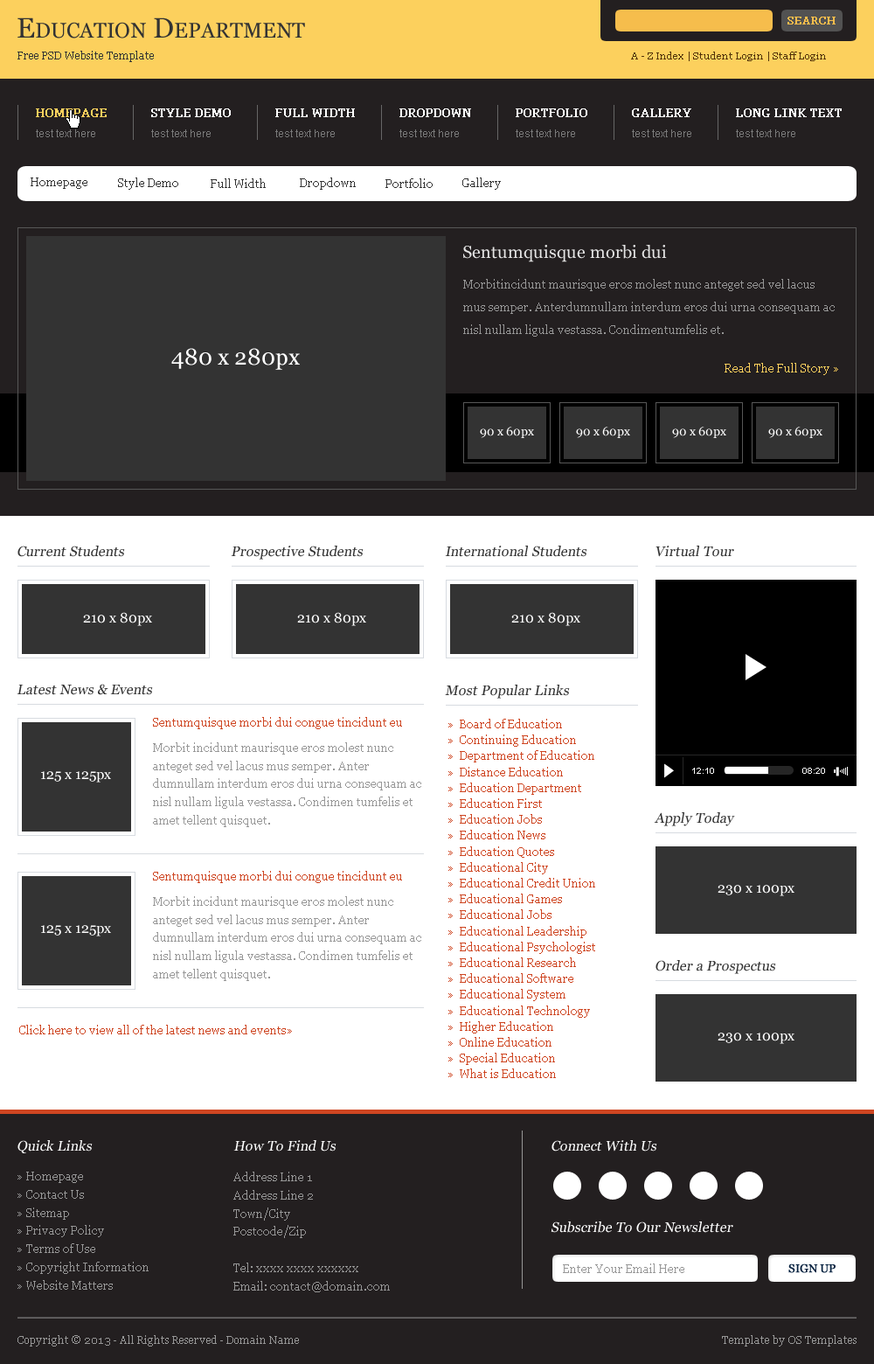
<style>
.page{position:relative;width:874px;height:1364px;background:#ffffff}
.page>*{position:absolute;margin:0}
.t1{font:21px "Georgia";color:#333333}
.t2{font:28px "Georgia";color:#333333}
.t3{font:10.5px "Georgia";color:#f6bd4c;font-weight:bold}
.t4{font:10.5px "Georgia";color:#333333}
.t5{font:9.6px "Georgia";color:#533209}
.t6{font:11.4px "Georgia";color:#fcd05d;font-weight:bold}
.t7{font:11.4px "Georgia";color:#ffffff;font-weight:bold}
.t8{font:10.5px "ArialMT";color:#797979}
.t9{font:11.4px "Georgia";color:#333333}
.t10{font:17.5px "Georgia";color:#e5e5e5}
.t11{font:11.4px/22.7px "Georgia";color:#979797}
.t12{font:22.7px "Georgia";color:#ffffff}
.t13{font:11.4px "Georgia";color:#fcd05d}
.t14{font:12.2px "Georgia";color:#ffffff}
.t15{font:14px "Georgia";color:#333333;font-style:italic}
.t16{font:14px "Georgia";color:#ffffff}
.t17{font:11.4px "Georgia";color:#ce4521}
.t18{font:11.4px/15.9px "Georgia";color:#ce4521}
.t19{font:11.4px/18.2px "Georgia";color:#979797}
.t20{font:8.7px "ArialMT";color:#ffffff}
.t21{font:14px "Georgia";color:#ffffff;font-style:italic}
.t22{font:11.4px "Georgia";color:#989898}
.t23{font:11.4px "Georgia";color:#06213f;text-transform:uppercase;font-weight:bold}
.t24{font:10.5px "Georgia";color:#979797}
</style>
<div class="page">
<p class="t1" style="left:17px;top:17px;width:288px;height:21px"><span class="t2">E</span>DUCATION<span class="t2"> D</span>EPARTMENT</p>
<p class="t3" style="left:788px;top:17px;width:48px;height:7px">SEARCH</p>
<p class="t4" style="left:17px;top:51px;width:137px;height:11px">Free PSD Website Template</p>
<p class="t5" style="left:631px;top:52px;width:195px;height:9px">A - Z Index | Student Login | Staff Login</p>
<p class="t6" style="left:36px;top:108px;width:71px;height:9px">HOMEPAGE</p>
<p class="t7" style="left:151px;top:108px;width:80px;height:9px">STYLE DEMO</p>
<p class="t7" style="left:275px;top:108px;width:80px;height:9px">FULL WIDTH</p>
<p class="t7" style="left:400px;top:108px;width:71px;height:9px">DROPDOWN</p>
<p class="t7" style="left:516px;top:108px;width:72px;height:9px">PORTFOLIO</p>
<p class="t7" style="left:632px;top:108px;width:60px;height:9px">GALLERY</p>
<p class="t7" style="left:736px;top:108px;width:106px;height:9px">LONG LINK TEXT</p>
<p class="t8" style="left:36px;top:129px;width:59px;height:8px">test text here</p>
<p class="t8" style="left:151px;top:129px;width:60px;height:8px">test text here</p>
<p class="t8" style="left:275px;top:129px;width:60px;height:8px">test text here</p>
<p class="t8" style="left:400px;top:129px;width:59px;height:8px">test text here</p>
<p class="t8" style="left:516px;top:129px;width:59px;height:8px">test text here</p>
<p class="t8" style="left:632px;top:129px;width:60px;height:8px">test text here</p>
<p class="t8" style="left:736px;top:129px;width:60px;height:8px">test text here</p>
<p class="t9" style="left:31px;top:177px;width:56px;height:12px">Homepage</p>
<p class="t9" style="left:118px;top:177px;width:60px;height:13px">Style Demo</p>
<p class="t9" style="left:211px;top:178px;width:55px;height:10px">Full Width</p>
<p class="t9" style="left:300px;top:177px;width:56px;height:13px">Dropdown</p>
<p class="t9" style="left:386px;top:178px;width:47px;height:10px">Portfolio</p>
<p class="t9" style="left:462px;top:177px;width:39px;height:13px">Gallery</p>
<p class="t10" style="left:463px;top:245px;width:204px;height:17px">Sentumquisque morbi dui</p>
<p class="t11" style="left:463px;top:279px;width:372px;height:58px">Morbitincidunt maurisque eros molest nunc anteget sed vel lacus mus semper. Anterdumnullam interdum eros dui urna consequam ac nisl nullam ligula vestassa. Condimentumfelis et.</p>
<p class="t12" style="left:171px;top:348px;width:129px;height:22px">480 x 280px</p>
<p class="t13" style="left:725px;top:363px;width:113px;height:12px">Read The Full Story »</p>
<p class="t14" style="left:480px;top:427px;width:54px;height:11px">90 x 60px</p>
<p class="t14" style="left:576px;top:427px;width:54px;height:11px">90 x 60px</p>
<p class="t14" style="left:672px;top:427px;width:55px;height:11px">90 x 60px</p>
<p class="t14" style="left:768px;top:427px;width:55px;height:11px">90 x 60px</p>
<p class="t15" style="left:17px;top:546px;width:108px;height:11px">Current Students</p>
<p class="t15" style="left:231px;top:546px;width:133px;height:14px">Prospective Students</p>
<p class="t15" style="left:445px;top:546px;width:143px;height:11px">International Students</p>
<p class="t15" style="left:656px;top:546px;width:78px;height:11px">Virtual Tour</p>
<p class="t16" style="left:83px;top:612px;width:69px;height:14px">210 x 80px</p>
<p class="t16" style="left:297px;top:612px;width:69px;height:14px">210 x 80px</p>
<p class="t16" style="left:511px;top:612px;width:70px;height:14px">210 x 80px</p>
<p class="t15" style="left:17px;top:684px;width:136px;height:11px">Latest News &amp; Events</p>
<p class="t15" style="left:445px;top:685px;width:125px;height:14px">Most Popular Links</p>
<p class="t17" style="left:153px;top:717px;width:249px;height:12px">Sentumquisque morbi dui congue tincidunt eu</p>
<p class="t18" style="left:449px;top:719px;width:146px;height:359px">»  Board of Education<br>»  Continuing Education<br>»  Department of Education<br>»  Distance Education<br>»  Education Department<br>»  Education First<br>»  Education Jobs<br>»  Education News<br>»  Education Quotes<br>»  Educational City<br>»  Educational Credit Union<br>»  Educational Games<br>»  Educational Jobs<br>»  Educational Leadership<br>»  Educational Psychologist<br>»  Educational Research<br>»  Educational Software<br>»  Educational System<br>»  Educational Technology<br>»  Higher Education<br>»  Online Education<br>»  Special Education<br>»  What is Education</p>
<p class="t19" style="left:153px;top:742px;width:268px;height:85px">Morbit incidunt maurisque eros molest nunc anteget sed vel lacus mus semper. Anter dumnullam interdum eros dui urna consequam ac nisl nullam ligula vestassa. Condimen tumfelis et amet tellent quisquet.</p>
<p class="t16" style="left:41px;top:771px;width:70px;height:11px">125 x 125px</p>
<p class="t20" style="left:692px;top:768px;width:22px;height:6px">12:10</p>
<p class="t20" style="left:803px;top:768px;width:22px;height:6px">08:20</p>
<p class="t15" style="left:654px;top:812px;width:81px;height:14px">Apply Today</p>
<p class="t17" style="left:153px;top:871px;width:249px;height:12px">Sentumquisque morbi dui congue tincidunt eu</p>
<p class="t16" style="left:718px;top:885px;width:77px;height:11px">230 x 100px</p>
<p class="t19" style="left:153px;top:896px;width:268px;height:85px">Morbit incidunt maurisque eros molest nunc anteget sed vel lacus mus semper. Anter dumnullam interdum eros dui urna consequam ac nisl nullam ligula vestassa. Condimen tumfelis et amet tellent quisquet.</p>
<p class="t16" style="left:41px;top:925px;width:70px;height:11px">125 x 125px</p>
<p class="t15" style="left:656px;top:960px;width:120px;height:14px">Order a Prospectus</p>
<p class="t17" style="left:19px;top:1025px;width:273px;height:9px">Click here to view all of the latest news and events»</p>
<p class="t16" style="left:718px;top:1033px;width:77px;height:11px">230 x 100px</p>
<p class="t21" style="left:17px;top:1140px;width:76px;height:13px">Quick Links</p>
<p class="t21" style="left:233px;top:1140px;width:104px;height:11px">How To Find Us</p>
<p class="t21" style="left:552px;top:1140px;width:105px;height:11px">Connect With Us</p>
<p class="t19" style="left:17px;top:1172px;width:132px;height:118px">» Homepage<br>» Contact Us<br>» Sitemap<br>» Privacy Policy<br>» Terms of Use<br>» Copyright Information<br>» Website Matters</p>
<p class="t19" style="left:233px;top:1172px;width:157px;height:120px">Address Line 1<br>Address Line 2<br>Town/City<br>Postcode/Zip<br><br>Tel: xxxx xxxx xxxxxx<br>Email: contact@domain.com</p>
<p class="t21" style="left:551px;top:1221px;width:183px;height:12px">Subscribe To Our Newsletter</p>
<p class="t22" style="left:563px;top:1263px;width:122px;height:10px">Enter Your Email Here</p>
<p class="t23" style="left:789px;top:1263px;width:47px;height:10px">SIGN UP</p>
<p class="t24" style="left:17px;top:1335px;width:282px;height:11px">Copyright © 2013 - All Rights Reserved - Domain Name</p>
<p class="t24" style="left:722px;top:1335px;width:135px;height:11px">Template by OS Templates</p>
</div>
